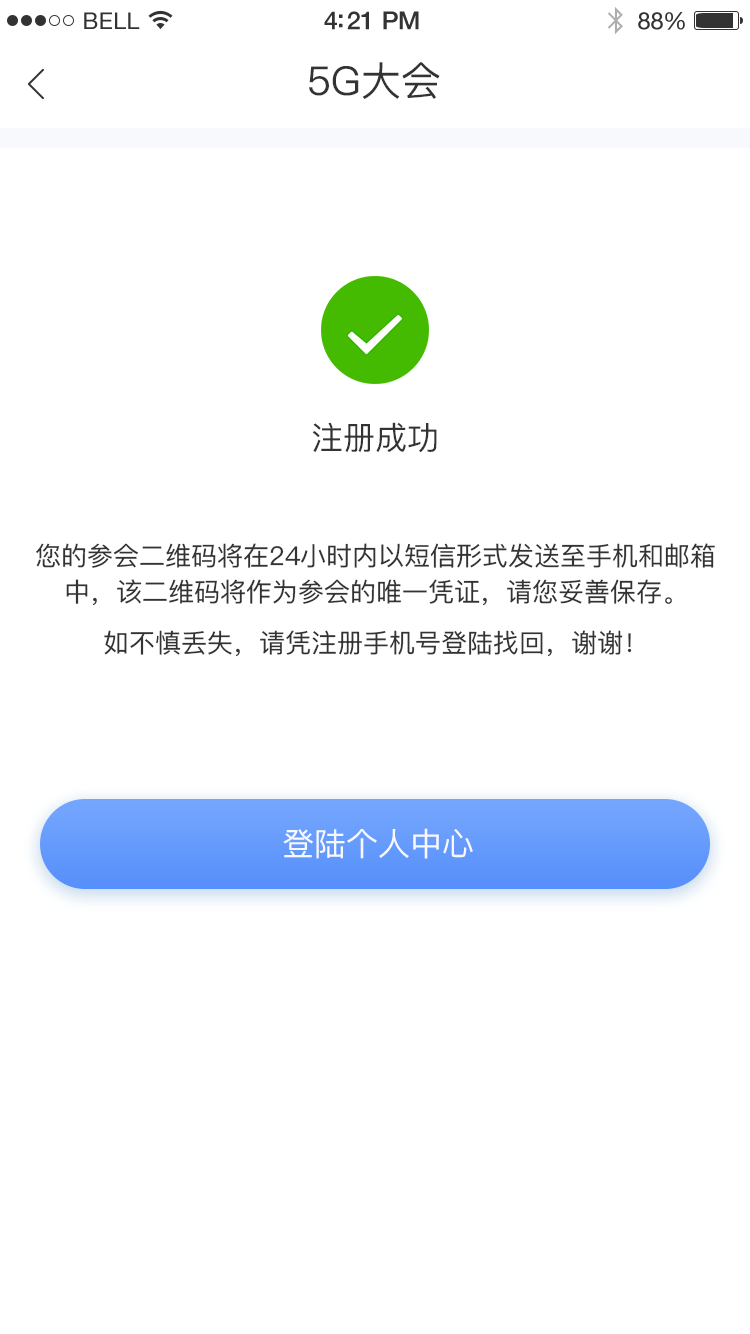
<style>
.page{position:relative;width:750px;height:1334px;background:#ffffff}
.page>*{position:absolute;margin:0}
.t1{font:23px "HelveticaNeue";letter-spacing:0.02em;color:#333333}
.t2{font:25px "HelveticaNeue-Medium";letter-spacing:-0.02em;color:#333333}
.t3{font:24px "HelveticaNeue";letter-spacing:-0.02em;color:#333333}
.t4{font:40px "PingFangSC-Regular";color:#333333}
.t5{font:32px "PingFangSC-Regular";color:#333333}
.t6{font:26px/36px "PingFangSC-Regular";color:#333333}
.t7{font:32px "PingFangSC-Regular";color:#f8f9fc}
</style>
<div class="page">
<p class="t1" style="left:84px;top:12px;width:56px;height:17px">BELL</p>
<p class="t2" style="left:324px;top:11px;width:95px;height:19px">4:21 PM</p>
<p class="t3" style="left:638px;top:12px;width:47px;height:18px">88%</p>
<p class="t4" style="left:309px;top:62px;width:131px;height:37px">5G大会</p>
<p class="t5" style="left:312px;top:422px;width:125px;height:31px">注册成功</p>
<p class="t6" style="left:36px;top:543px;width:679px;height:114px;text-align:center">您的参会二维码将在24小时内以短信形式发送至手机和邮箱中，该二维码将作为参会的唯一凭证，请您妥善保存。<br>如不慎丢失，请凭注册手机号登陆找回，谢谢！</p>
<p class="t7" style="left:283px;top:828px;width:190px;height:31px">登陆个人中心</p>
</div>
